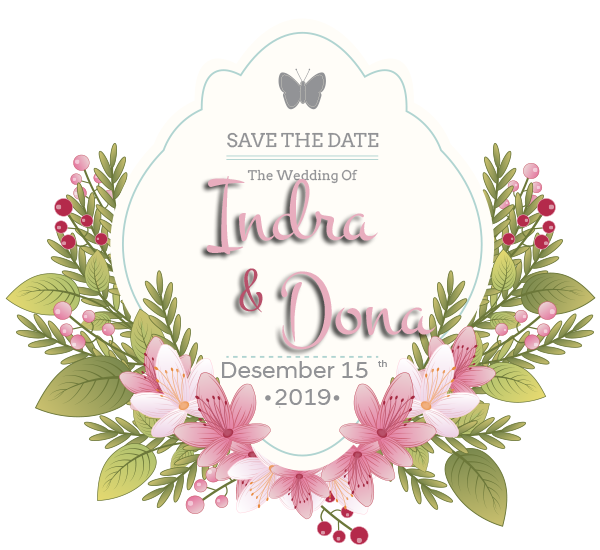
<style>
.page{position:relative;width:600px;height:550px;background:#ffffff}
.page>*{position:absolute;margin:0}
.t1{font:90px "Montez-Regular";color:#e8adbe}
.t2{font:60px "Montez-Regular";color:#b8506a}
.t3{font:24px "HyundaiSansHeadOffice-Regular";color:#929396}
.t4{font:10px "HyundaiSansHeadOffice-Regular";color:#929396}
</style>
<div class="page">
<p class="t1" style="left:206px;top:176px;width:172px;height:79px">Indra</p>
<p class="t2" style="left:239px;top:268px;width:24px;height:45px">&amp;</p>
<p class="t1" style="left:281px;top:271px;width:155px;height:79px">Dona</p>
<p class="t3" style="left:222px;top:361px;width:146px;height:17px">Desember 15</p>
<p class="t4" style="left:378px;top:360px;width:9px;height:7px">th</p>
<p class="t3" style="left:275px;top:389px;width:56px;height:16px">2019</p>
</div>
